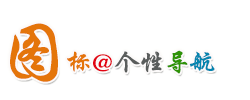
<style>
.page{position:relative;width:250px;height:100px;background:#ffffff}
.page>*{position:absolute;margin:0}
.t1{font:24.6px "JQXingKaiJT";letter-spacing:-0.075em;color:#5a5d5c;font-weight:bold;scale:1.08 1}
.t2{font:70.6px "JQXingKaiJT";letter-spacing:-0.115em;color:#e4750a;font-weight:bold;scale:1.08 1}
.t3{font:24.6px "JQXingKaiJT";letter-spacing:-0.115em;color:#e4750a;font-weight:bold;scale:1.08 1}
.t4{font:24.6px "JQXingKaiJT";letter-spacing:-0.075em;color:#e20413;font-weight:bold;scale:1.08 1}
.t5{font:24.6px "JQXingKaiJT";letter-spacing:-0.075em;color:#2f9307;font-weight:bold;scale:1.08 1}
.t6{font:24.6px "JQXingKaiJT";letter-spacing:-0.075em;color:#0585af;font-weight:bold;scale:1.08 1}
</style>
<div class="page">
<p class="t1" style="left:10px;top:23px;width:205px;height:59px"><span class="t2">图</span><span class="t3">标</span><span class="t4">@</span>个性<span class="t5">导</span><span class="t6">航</span></p>
</div>
